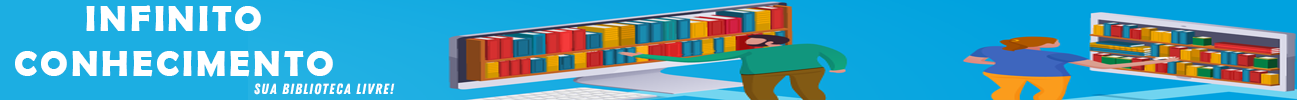
<style>
.page{position:relative;width:1297px;height:100px}
.page>*{position:absolute;margin:0}
.t1{font:37.3px "BerlinSansFBDemi-Bold";letter-spacing:0.075em;color:#ffffff;text-transform:uppercase}
.t2{font:14.8px "ZingRustDemo-Base";letter-spacing:0.075em;color:#ffffff;text-transform:uppercase}
</style>
<div class="page">
<p class="t1" style="left:15px;top:5px;width:318px;height:72px;text-align:center">Infinito<br>COnhecimento</p>
<p class="t2" style="left:254px;top:83px;width:141px;height:12px">Sua Biblioteca livre!</p>
</div>
